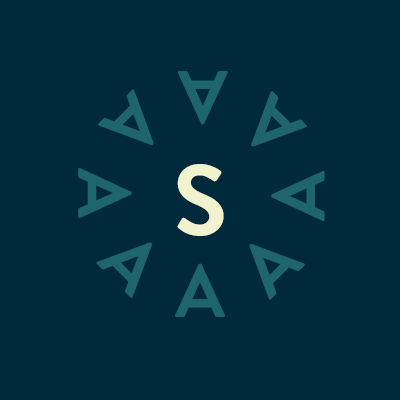
<style>
.page{position:relative;width:400px;height:400px;background:#00293c}
.page>*{position:absolute;margin:0}
.t1{font:75px "BrandonTextW01-Bold";letter-spacing:0.04em;color:#1e656d}
.t2{font:100px "BrandonTextW01-Bold";letter-spacing:0.04em;color:#f1f3ce}
</style>
<div class="page">
<p class="t1" style="left:177px;top:71px;width:51px;height:54px;rotate:180deg">A</p>
<p class="t1" style="left:98px;top:89px;width:56px;height:56px;rotate:135deg">A</p>
<p class="t1" style="left:251px;top:91px;width:56px;height:56px;rotate:-135deg">A</p>
<p class="t1" style="left:78px;top:168px;width:54px;height:50px;rotate:90deg">A</p>
<p class="t2" style="left:177px;top:164px;width:47px;height:72px">S</p>
<p class="t1" style="left:271px;top:171px;width:54px;height:50px;rotate:-90deg">A</p>
<p class="t1" style="left:96px;top:242px;width:56px;height:56px;rotate:45deg">A</p>
<p class="t1" style="left:249px;top:244px;width:56px;height:56px;rotate:-45deg">A</p>
<p class="t1" style="left:175px;top:263px;width:50px;height:54px">A</p>
</div>
